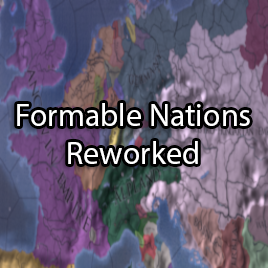
<style>
.page{position:relative;width:268px;height:268px}
.page>*{position:absolute;margin:0}
.t1{font:32px "MyriadPro-Regular";color:#ffffff}
</style>
<div class="page">
<p class="t1" style="left:17px;top:103px;width:233px;height:61px;text-align:center">Formable Nations<br>Reworked</p>
</div>
